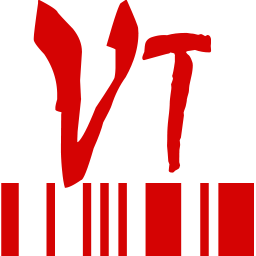
<style>
.page{position:relative;width:256px;height:256px;background:#ffffff}
.page>*{position:absolute;margin:0}
.t1{font:158px "Vardhaman";color:#d50303}
</style>
<div class="page">
<p class="t1" style="left:33px;top:0px;width:179px;height:188px">VT</p>
</div>
